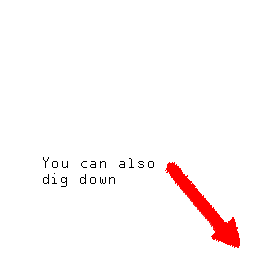
<style>
.page{position:relative;width:256px;height:256px;background:#ffffff}
.page>*{position:absolute;margin:0}
.t1{font:13.3px "OCRAStd";color:#000000}
</style>
<div class="page">
<p class="t1" style="left:43px;top:157px;width:111px;height:30px">You can also <br>dig down</p>
</div>
